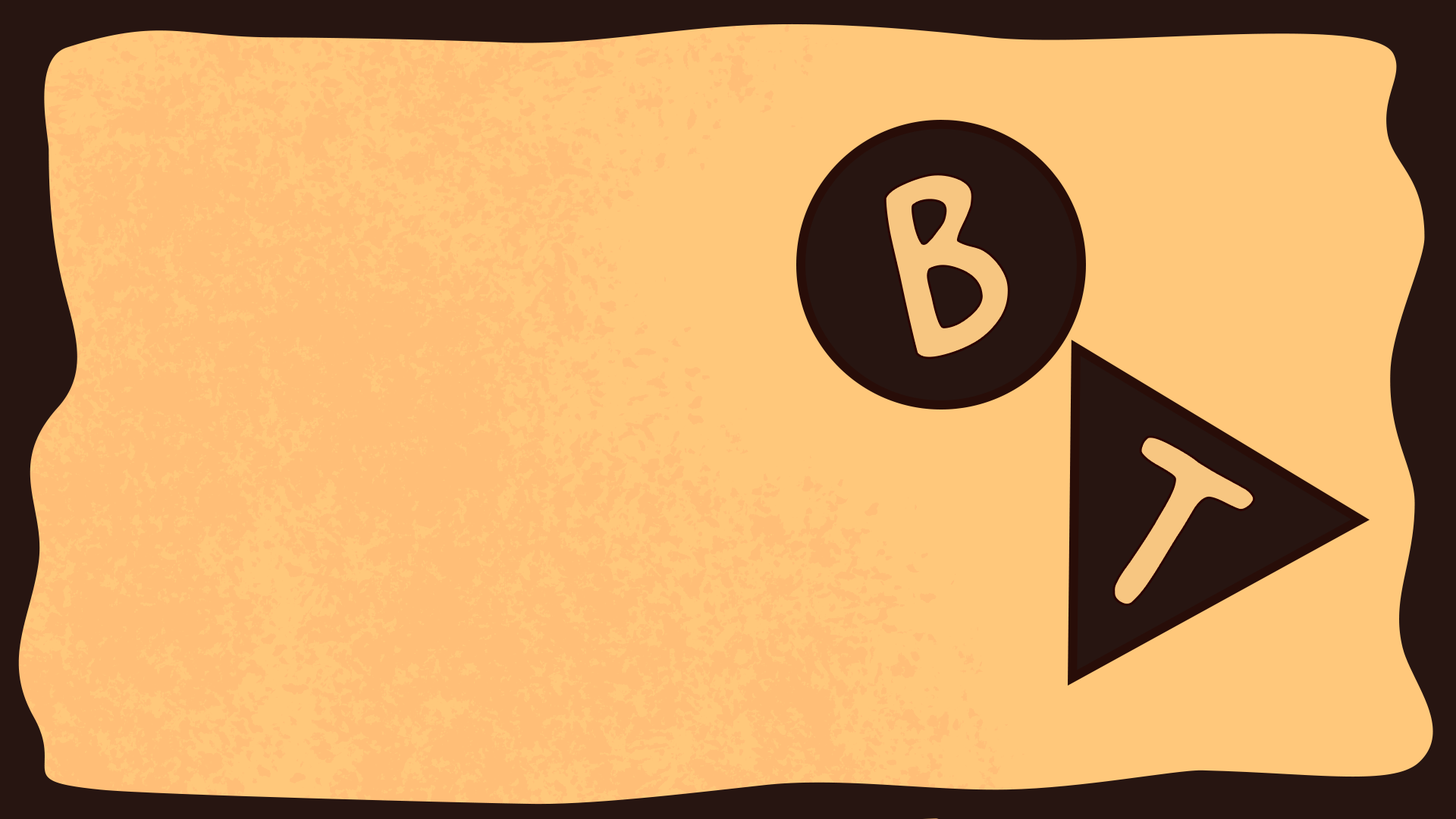
<style>
.page{position:relative;width:1456px;height:819px;background:#ffc87b}
.page>*{position:absolute;margin:0}
.t1{font:273.7px "GoodDogNew";color:#f7c681}
.t2{font:254.9px "GoodDogNew";color:#f7c681}
</style>
<div class="page">
<p class="t1" style="left:883px;top:173px;width:127px;height:186px;rotate:-17deg">B</p>
<p class="t2" style="left:1112px;top:435px;width:144px;height:171px;rotate:31deg">T</p>
</div>
